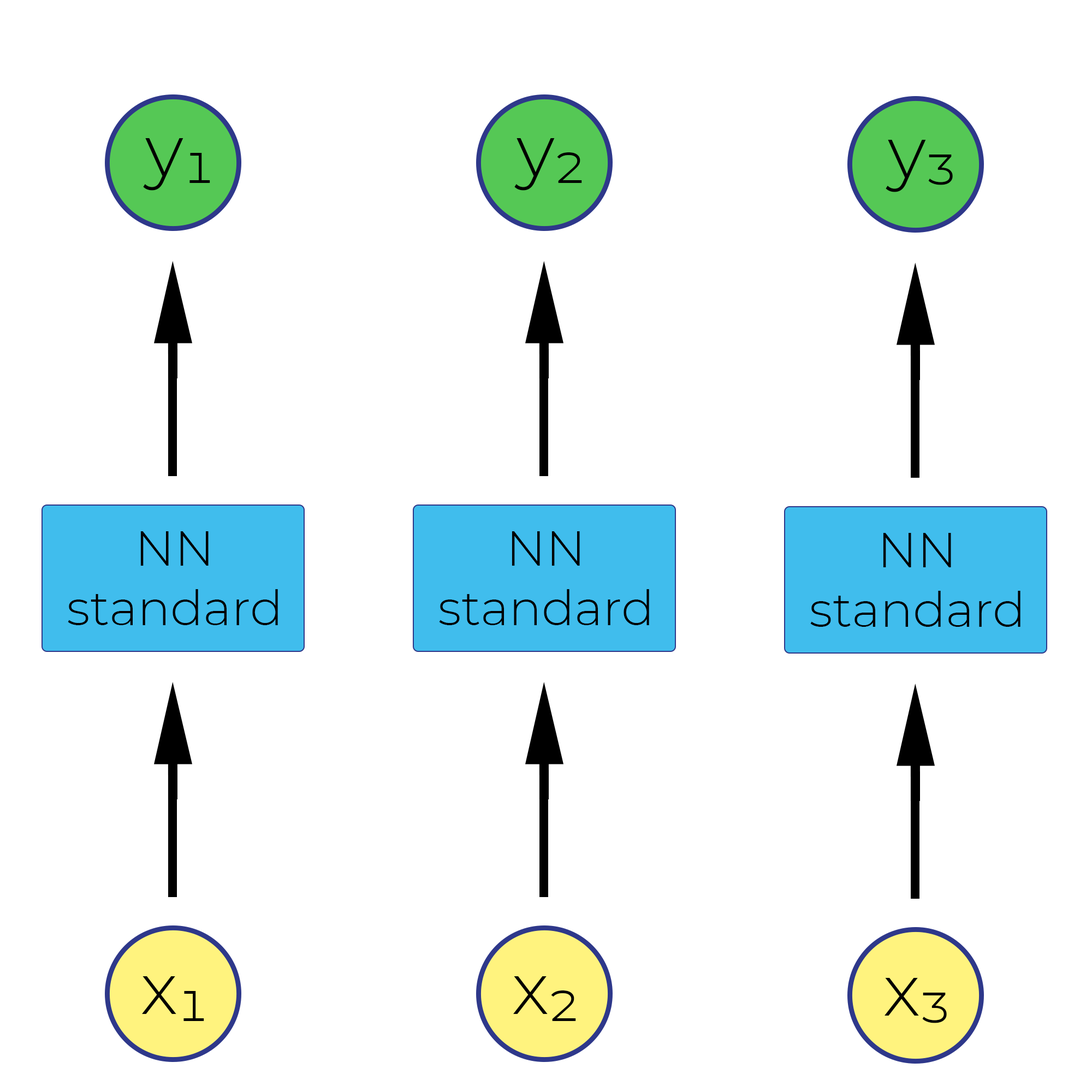
<style>
.page{position:relative;width:1092px;height:1092px;background:#ffffff}
.page>*{position:absolute;margin:0}
.t1{font:72.1px "Montserrat-Light";color:#010000}
.t2{font:48.6px/59.5px "Montserrat-Light";color:#010000}
</style>
<div class="page">
<p class="t1" style="left:143px;top:138px;width:67px;height:53px">y₁</p>
<p class="t1" style="left:514px;top:138px;width:68px;height:53px">y₂</p>
<p class="t1" style="left:886px;top:140px;width:67px;height:52px">y₃</p>
<p class="t2" style="left:68px;top:531px;width:210px;height:94px;text-align:center">NN<br>standard</p>
<p class="t2" style="left:439px;top:531px;width:210px;height:94px;text-align:center">NN<br>standard</p>
<p class="t2" style="left:810px;top:533px;width:210px;height:94px;text-align:center">NN<br>standard</p>
<p class="t1" style="left:142px;top:976px;width:62px;height:45px">x₁</p>
<p class="t1" style="left:513px;top:976px;width:63px;height:45px">x₂</p>
<p class="t1" style="left:885px;top:978px;width:62px;height:45px">x₃</p>
</div>
